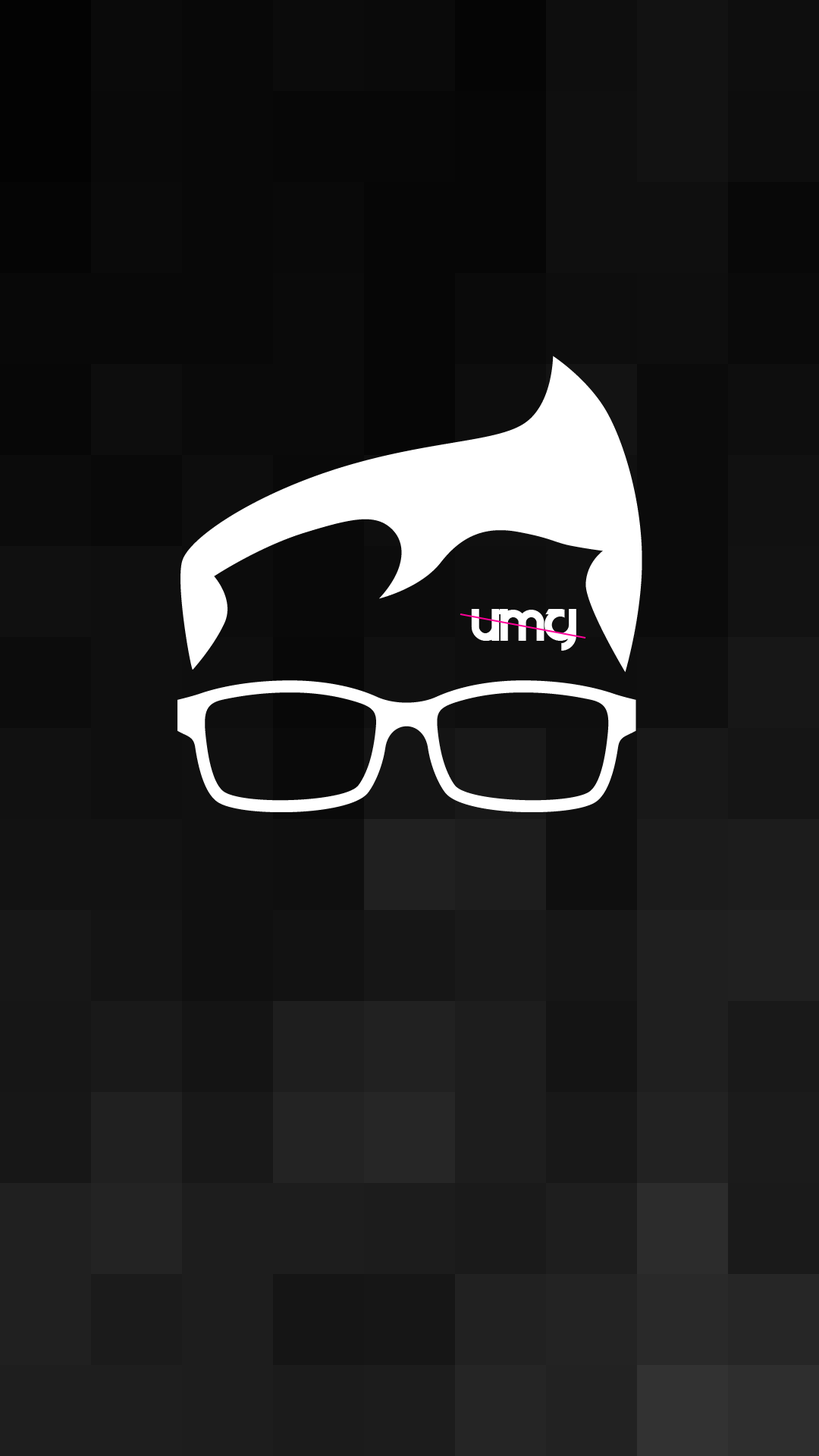
<style>
.page{position:relative;width:819px;height:1456px}
.page>*{position:absolute;margin:0}
.t1{font:45.5px "Velocity";color:#ffffff}
</style>
<div class="page">
<p class="t1" style="left:471px;top:609px;width:105px;height:42px">umg</p>
</div>
